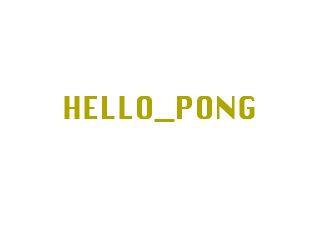
<style>
.page{position:relative;width:320px;height:240px;background:#ffffff}
.page>*{position:absolute;margin:0}
.t1{font:30px "Krungthep";color:#afa500}
</style>
<div class="page">
<p class="t1" style="left:64px;top:96px;width:191px;height:26px">HELLO_PONG</p>
</div>
